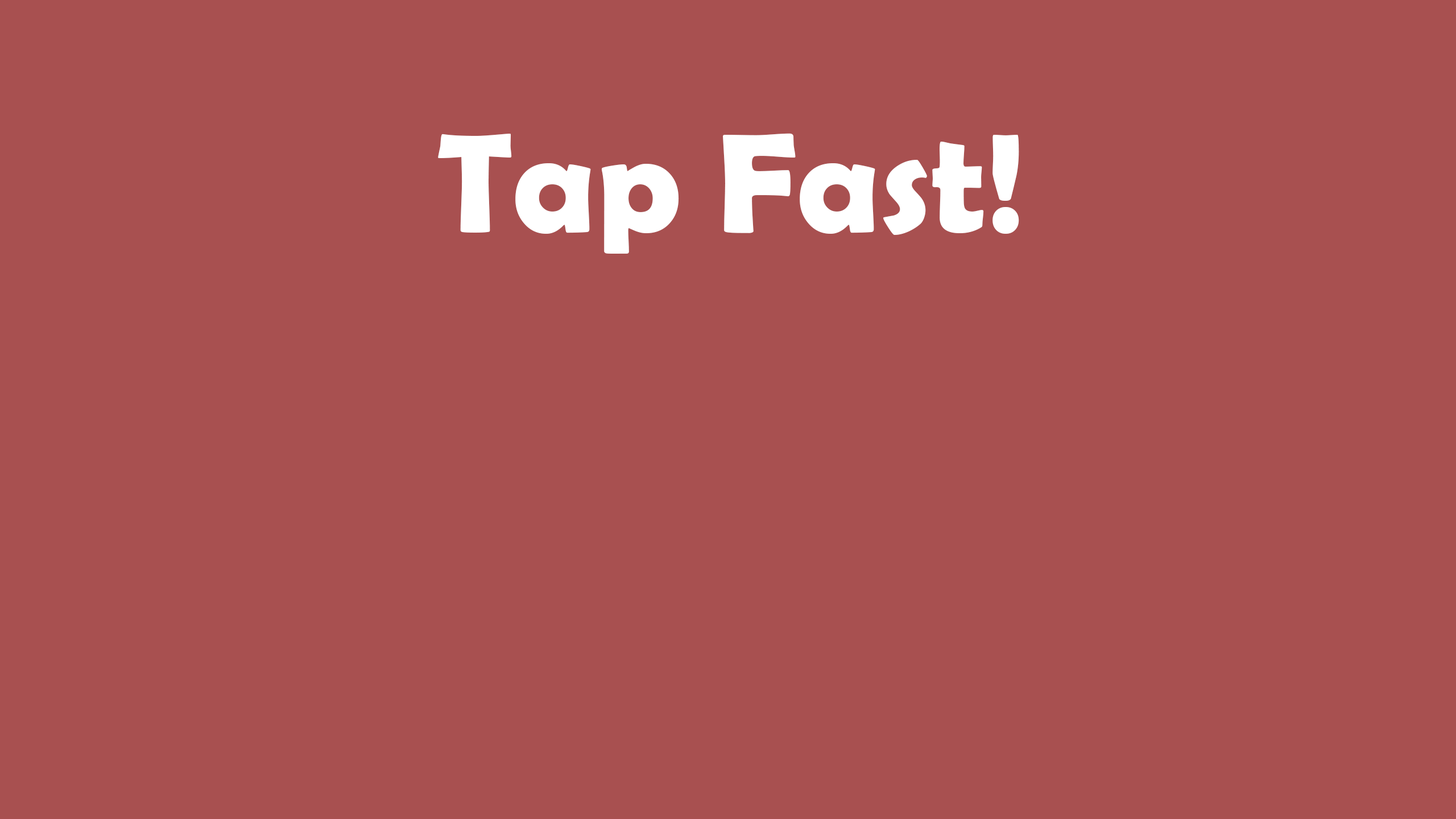
<style>
.page{position:relative;width:1456px;height:819px;background:#a85050}
.page>*{position:absolute;margin:0}
.t1{font:142.2px "BerlinSansFBDemi-Bold";color:#ffffff}
</style>
<div class="page">
<p class="t1" style="left:438px;top:133px;width:581px;height:121px">Tap Fast!</p>
</div>
